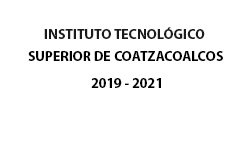
<style>
.page{position:relative;width:252px;height:149px;background:#ffffff}
.page>*{position:absolute;margin:0}
.t1{font:14px "MyriadPro-Bold";color:#1b1b1b}
.t2{font:14px "MyriadPro-Bold";color:#000000}
.t3{font:14px "MyriadPro-Bold";color:#010101}
</style>
<div class="page">
<p class="t1" style="left:44px;top:27px;width:161px;height:12px">INSTITUTO TECNOLÓGICO</p>
<p class="t2" style="left:28px;top:51px;width:195px;height:10px">SUPERIOR DE COATZACOALCOS</p>
<p class="t3" style="left:91px;top:78px;width:70px;height:10px">2019 - 2021</p>
</div>
